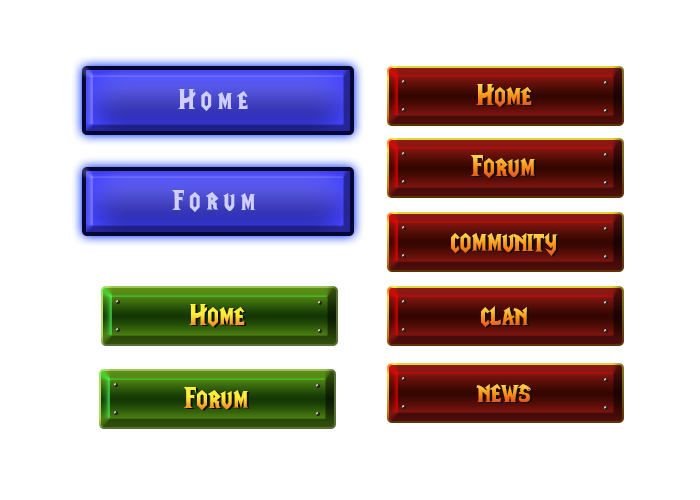
<style>
.page{position:relative;width:700px;height:500px;background:#ffffff}
.page>*{position:absolute;margin:0}
.t1{font:29px "LifeCraft";letter-spacing:0.18em;color:#cfcfff}
.t2{font:30px "LifeCraft"}
.t3{font:30px "LifeCraft";color:#ffdd21}
</style>
<div class="page">
<p class="t1" style="left:178px;top:89px;width:70px;height:22px">Home</p>
<p class="t2" style="left:476px;top:84px;width:56px;height:23px">Home</p>
<p class="t2" style="left:470px;top:155px;width:65px;height:23px">Forum</p>
<p class="t1" style="left:172px;top:190px;width:84px;height:22px">Forum</p>
<p class="t2" style="left:451px;top:233px;width:107px;height:23px">community</p>
<p class="t3" style="left:189px;top:304px;width:56px;height:23px">Home</p>
<p class="t2" style="left:481px;top:306px;width:47px;height:21px">clan</p>
<p class="t3" style="left:183px;top:387px;width:65px;height:23px">Forum</p>
<p class="t2" style="left:476px;top:384px;width:55px;height:18px">news</p>
</div>
